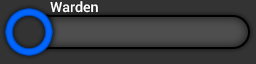
<style>
.page{position:relative;width:256px;height:64px;background:#333333}
.page>*{position:absolute;margin:0}
.t1{font:14px "Roboto-Medium";color:#ffffff}
</style>
<div class="page">
<p class="t1" style="left:50px;top:1px;width:48px;height:12px">Warden</p>
</div>
